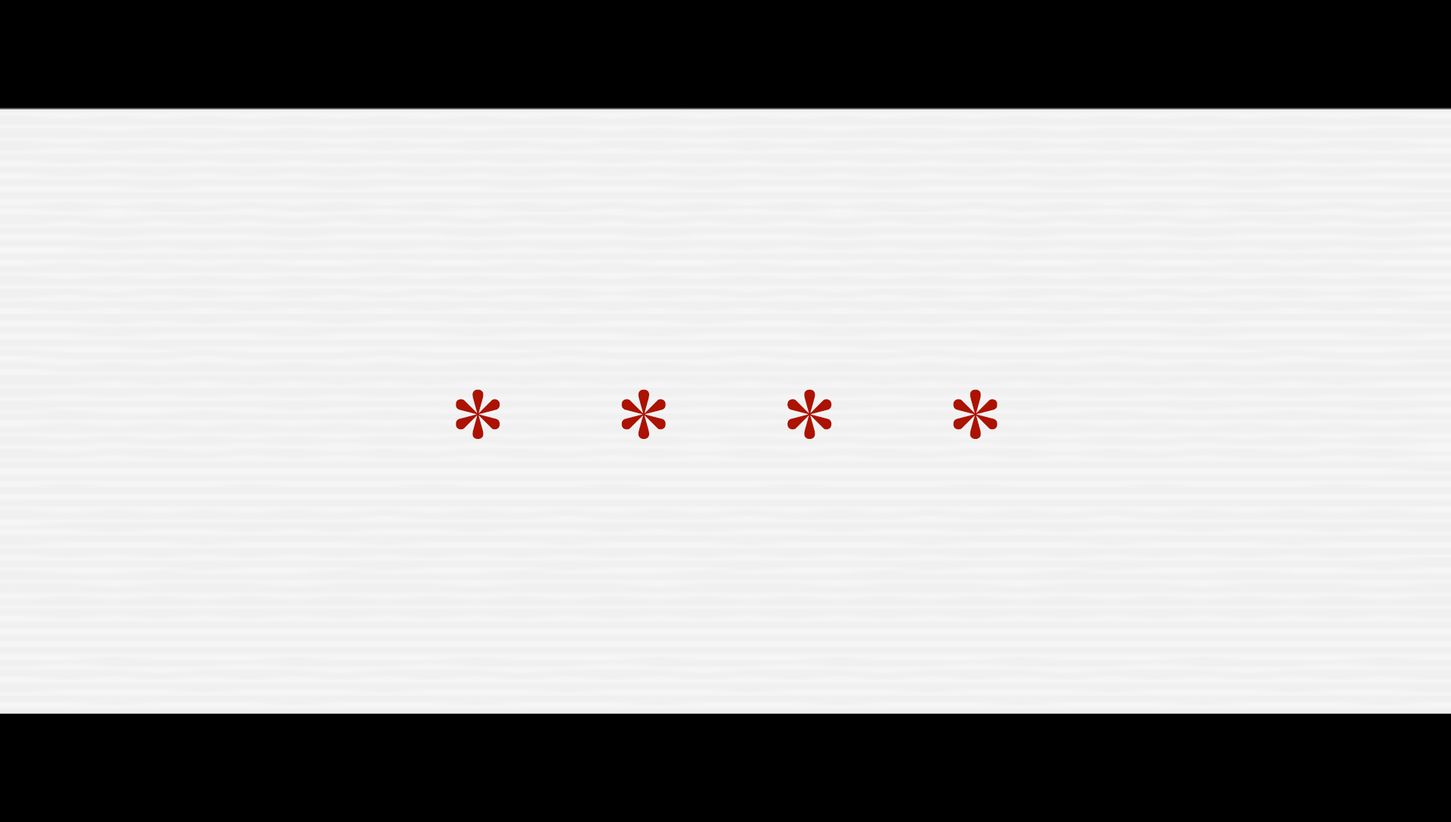
<style>
.page{position:relative;width:1451px;height:822px;background:#f0f0f0}
.page>*{position:absolute;margin:0}
.t1{font:79.3px "HGMinchoB";letter-spacing:1.09em;color:#ac1200}
</style>
<div class="page">
<p class="t1" style="left:456px;top:389px;width:541px;height:50px">＊＊＊＊</p>
</div>
